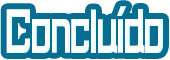
<style>
.page{position:relative;width:170px;height:60px;background:#076e92}
.page>*{position:absolute;margin:0}
.t1{font:49.2px "KafuTechnoStd-U";letter-spacing:-0.03em;color:#fffeff;scale:0.58 1}
</style>
<div class="page">
<p class="t1" style="left:6px;top:6px;width:157px;height:47px">Concluído</p>
</div>
